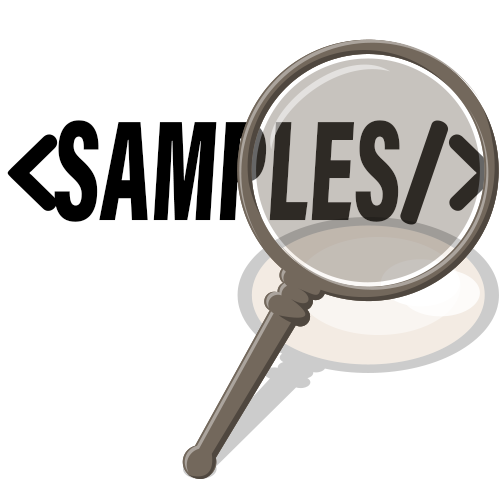
<style>
.page{position:relative;width:500px;height:500px;background:#ffffff}
.page>*{position:absolute;margin:0}
.t1{font:145.3px "AcuminConcept_800.000wght_65.000wdth_5.000slnt";scale:0.71 1}
</style>
<div class="page">
<p class="t1" style="left:54px;top:120px;width:346px;height:102px">SAMPLES</p>
</div>
